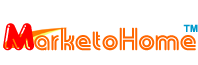
<style>
.page{position:relative;width:198px;height:65px;background:#ffffff}
.page>*{position:absolute;margin:0}
.t1{font:36px "VNI-Fato";color:#ff0000}
.t2{font:36px "VNI-Tubes";color:#ff6600}
.t3{font:10px "Arial-BoldMT";color:#0099cc}
</style>
<div class="page">
<p class="t1" style="left:3px;top:23px;width:31px;height:28px">M</p>
<p class="t2" style="left:34px;top:27px;width:162px;height:24px">arketoHome</p>
<p class="t3" style="left:183px;top:24px;width:15px;height:8px">TM</p>
</div>
